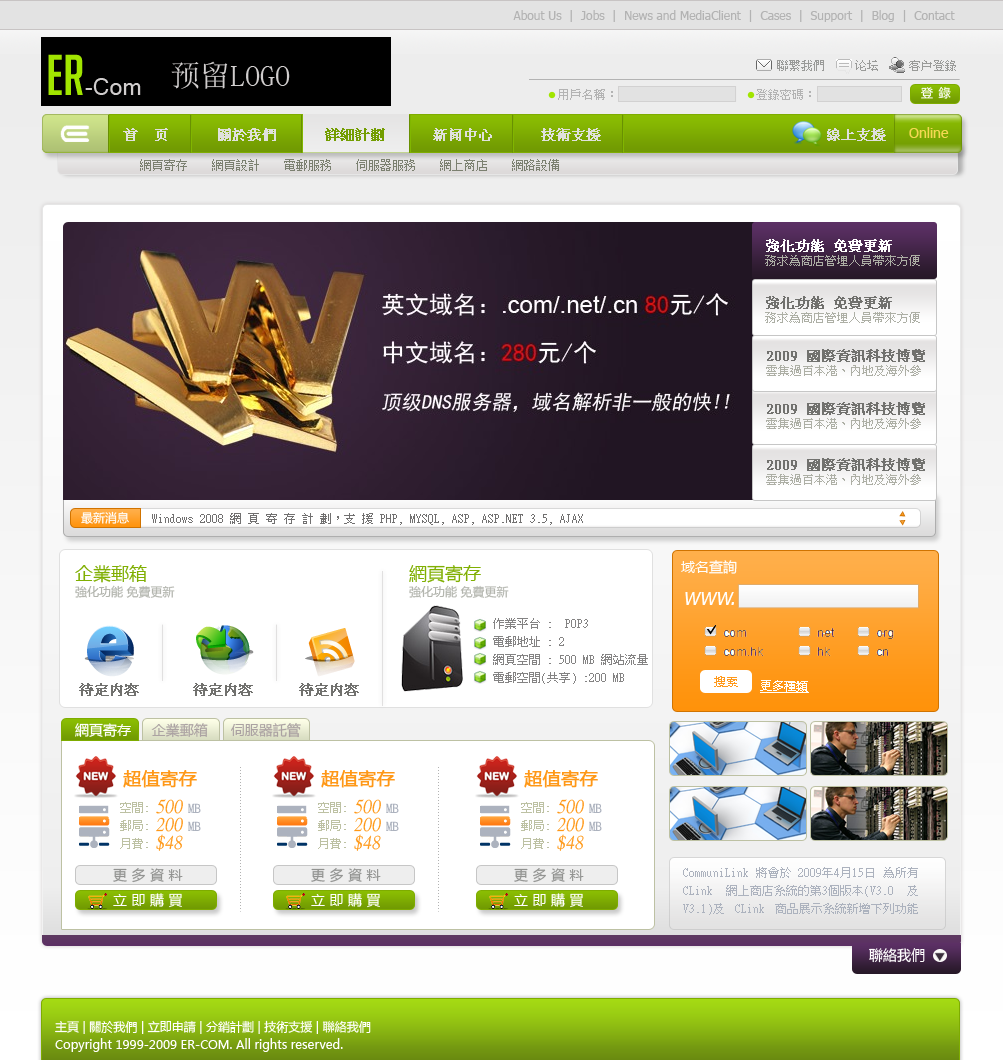
<style>
.page{position:relative;width:1003px;height:1060px}
.page>*{position:absolute;margin:0}
.t1{font:12px "Tahoma";color:#b3b3b3}
.t2{font:56px "BigNoodleTitling";color:#a1e500}
.t3{font:30px "SimSun";color:#d0cdcd}
.t4{font:12px "MingLiU";color:#999a98}
.t5{font:23.3px "MicrosoftSansSerif";color:#d0cdcd}
.t6{font:12px "MingLiU";color:#b3b3b3}
.t7{font:12px "MicrosoftYaHei";letter-spacing:0.46em;color:#ffffff}
.t8{font:14px "MingLiU";color:#e0e1dd;font-weight:bold}
.t9{font:14px "MingLiU";color:#739d00;font-weight:bold}
.t10{font:14px "MingLiU";color:#dfdfdf;font-weight:bold}
.t11{font:14px "Tahoma";color:#f5d853}
.t12{font:12px "SimSun";color:#7b8070}
.t13{font:14px "MingLiU";color:#ffffff;font-weight:bold}
.t14{font:12px "MingLiU";color:#adafa5}
.t15{font:14px "MingLiU";color:#70706d;font-weight:bold}
.t16{font:14px "MingLiU";color:#71716e;font-weight:bold}
.t17{font:12px "MicrosoftYaHei";color:#ffffff}
.t18{font:12px "MingLiU";color:#717070}
.t19{font:18px "MicrosoftYaHei";color:#80af02}
.t20{font:14px "MicrosoftYaHei";color:#ffffff}
.t21{font:12px "MicrosoftYaHei";color:#b4b6af}
.t22{font:18px "Tahoma";color:#ffffff;font-style:italic}
.t23{font:12px/18px "MingLiU";color:#848383}
.t24{font:12px "MicrosoftYaHei";color:#ff991a}
.t25{font:12px "MicrosoftYaHei";color:#ffffff;text-decoration:underline}
.t26{font:18px "MicrosoftYaHei";color:#ff9817;font-weight:bold}
.t27{font:18px "MicrosoftYaHei";color:#ff9817;font-weight:bold;font-style:italic}
.t28{font:12px/18px "MingLiU";color:#bdc1a3}
.t29{font:18px/18px "MingLiU";color:#ff9817;font-style:italic}
.t30{font:12px/18px "MingLiU";color:#acb2be}
.t31{font:14px "MicrosoftYaHei";letter-spacing:0.32em;color:#929391}
.t32{font:14px "MicrosoftYaHei";letter-spacing:0.32em;color:#ffffff}
.t33{font:12px/18px "MicrosoftYaHei";color:#ffffff}
</style>
<div class="page">
<p class="t1" style="left:513px;top:10px;width:442px;height:12px">About Us  |  Jobs  |  News and MediaClient  |  Cases  |  Support  |  Blog  |  Contact</p>
<p class="t2" style="left:48px;top:54px;width:35px;height:41px">Er</p>
<p class="t3" style="left:171px;top:61px;width:119px;height:28px">预留LOGO</p>
<p class="t4" style="left:777px;top:60px;width:179px;height:11px">聯繫我們     论坛     客户登錄</p>
<p class="t5" style="left:85px;top:78px;width:56px;height:17px">-Com</p>
<p class="t6" style="left:558px;top:89px;width:253px;height:11px">用戶名稱：                       登錄密碼：</p>
<p class="t7" style="left:921px;top:86px;width:30px;height:13px">登錄</p>
<p class="t8" style="left:123px;top:128px;width:478px;height:13px">首  页      關於我們      <span class="t9">詳細計劃 </span>     新闻中心      技術支援</p>
<p class="t10" style="left:827px;top:128px;width:59px;height:13px">線上支援</p>
<p class="t11" style="left:909px;top:127px;width:40px;height:11px">Online</p>
<p class="t12" style="left:140px;top:159px;width:419px;height:12px">網頁寄存    網頁設計    電郵服務    伺服器服務    網上商店    網路設備</p>
<p class="t13" style="left:766px;top:239px;width:126px;height:13px">強化功能 免費更新</p>
<p class="t14" style="left:765px;top:255px;width:155px;height:11px">務求為商店管埋人員帶來方便</p>
<p class="t15" style="left:766px;top:296px;width:126px;height:13px">強化功能 免費更新</p>
<p class="t14" style="left:765px;top:312px;width:155px;height:11px">務求為商店管埋人員帶來方便</p>
<p class="t16" style="left:767px;top:349px;width:158px;height:13px">2009 國際資訊科技博覽</p>
<p class="t14" style="left:766px;top:365px;width:155px;height:11px">雲集過百本港、內地及海外參</p>
<p class="t16" style="left:767px;top:402px;width:158px;height:13px">2009 國際資訊科技博覽</p>
<p class="t14" style="left:766px;top:418px;width:155px;height:11px">雲集過百本港、內地及海外參</p>
<p class="t16" style="left:767px;top:458px;width:158px;height:13px">2009 國際資訊科技博覽</p>
<p class="t14" style="left:766px;top:474px;width:155px;height:11px">雲集過百本港、內地及海外參</p>
<p class="t17" style="left:81px;top:511px;width:48px;height:13px">最新消息</p>
<p class="t18" style="left:152px;top:513px;width:431px;height:12px">Windows 2008 網 頁 寄 存 計 劃，支 援 PHP, MYSQL, ASP, ASP.NET 3.5, AJAX</p>
<p class="t19" style="left:75px;top:565px;width:72px;height:18px">企業郵箱</p>
<p class="t19" style="left:409px;top:565px;width:72px;height:18px">網頁寄存</p>
<p class="t20" style="left:681px;top:560px;width:56px;height:14px">域名查詢</p>
<p class="t21" style="left:75px;top:585px;width:100px;height:13px">強化功能 免費更新</p>
<p class="t21" style="left:409px;top:585px;width:100px;height:13px">強化功能 免費更新</p>
<p class="t22" style="left:685px;top:592px;width:49px;height:13px">WWW.</p>
<p class="t23" style="left:493px;top:618px;width:155px;height:66px">作業平台 : POP3 <br>電郵地址 : 2<br>網頁空間 : 500 MB 網站流量<br>電郵空間(共享) :200 MB</p>
<p class="t24" style="left:714px;top:676px;width:24px;height:11px">搜索</p>
<p class="t16" style="left:79px;top:683px;width:60px;height:13px">待定内容</p>
<p class="t16" style="left:193px;top:683px;width:60px;height:13px">待定内容</p>
<p class="t16" style="left:299px;top:683px;width:60px;height:13px">待定内容</p>
<p class="t25" style="left:760px;top:680px;width:49px;height:13px">更多種類</p>
<p class="t26" style="left:123px;top:770px;width:74px;height:18px"><span class="t27">      </span>超值寄存</p>
<p class="t26" style="left:321px;top:770px;width:74px;height:18px"><span class="t27">      </span>超值寄存</p>
<p class="t26" style="left:524px;top:770px;width:74px;height:18px"><span class="t27">      </span>超值寄存</p>
<p class="t28" style="left:120px;top:802px;width:28px;height:47px;text-align:right">空間:<br>郵局:<br>月費:</p>
<p class="t29" style="left:156px;top:799px;width:45px;height:52px">500 <span class="t30">MB<br></span>200 <span class="t30">MB<br></span>$48</p>
<p class="t28" style="left:318px;top:802px;width:28px;height:47px;text-align:right">空間:<br>郵局:<br>月費:</p>
<p class="t29" style="left:354px;top:799px;width:45px;height:52px">500 <span class="t30">MB<br></span>200 <span class="t30">MB<br></span>$48</p>
<p class="t28" style="left:521px;top:802px;width:28px;height:47px;text-align:right">空間:<br>郵局:<br>月費:</p>
<p class="t29" style="left:557px;top:799px;width:45px;height:52px">500 <span class="t30">MB<br></span>200 <span class="t30">MB<br></span>$48</p>
<p class="t31" style="left:113px;top:868px;width:70px;height:15px">更多資料</p>
<p class="t31" style="left:311px;top:868px;width:70px;height:15px">更多資料</p>
<p class="t31" style="left:514px;top:868px;width:70px;height:15px">更多資料</p>
<p class="t30" style="left:683px;top:867px;width:235px;height:48px;text-align:justify">CommuniLink 將會於 2009年4月15日 為所有 CLink 網上商店系統的第3個版本(V3.0 及V3.1)及 CLink 商品展示系統新增下列功能及調整管理介面，務</p>
<p class="t32" style="left:113px;top:893px;width:69px;height:15px">立即購買</p>
<p class="t32" style="left:311px;top:893px;width:69px;height:15px">立即購買</p>
<p class="t32" style="left:514px;top:893px;width:69px;height:15px">立即購買</p>
<p class="t20" style="left:869px;top:948px;width:56px;height:15px">聯絡我們</p>
<p class="t33" style="left:55px;top:1020px;width:316px;height:32px">主頁 | 關於我們 | 立即申請 | 分銷計劃 | 技術支援 | 聯絡我們<br>Copyright 1999-2009 ER-COM. All rights reserved.</p>
</div>
